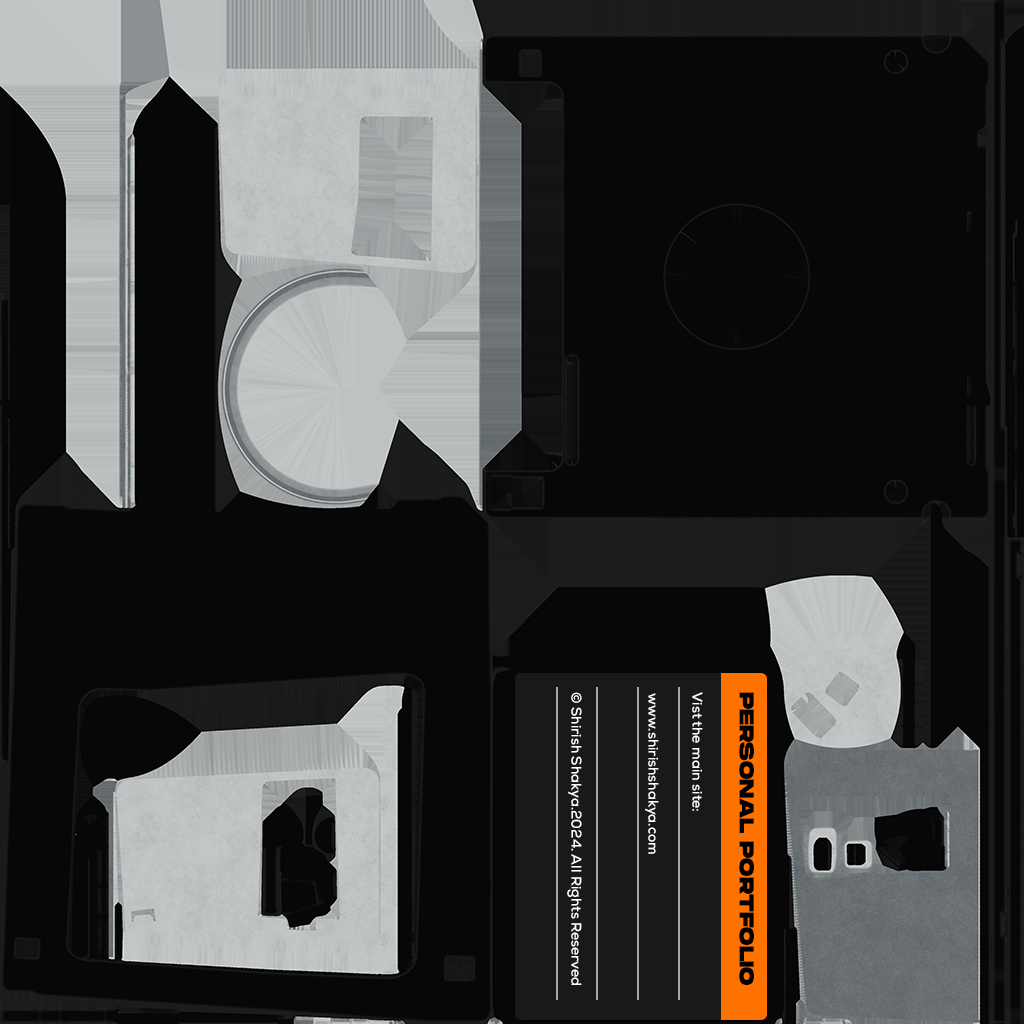
<style>
.page{position:relative;width:1024px;height:1024px;background:#070707}
.page>*{position:absolute;margin:0}
.t1{font:14px "Nexa-Bold";color:#ffffff}
.t2{font:20.3px "MonumentExtended-Ultrabold";color:#000000}
</style>
<div class="page">
<p class="t1" style="left:567px;top:692px;width:15px;height:293px;rotate:90deg">© Shirish Shakya.2024. All Rights Reserved</p>
<p class="t1" style="left:645px;top:693px;width:14px;height:161px;rotate:90deg">www.shirishshakya.com</p>
<p class="t1" style="left:692px;top:692px;width:11px;height:119px;rotate:90deg">Vist the main site:</p>
<p class="t2" style="left:739px;top:692px;width:15px;height:293px;rotate:90deg">PERSONAL PORTFOLIO</p>
</div>
